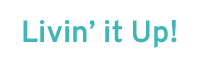
<style>
.page{position:relative;width:200px;height:60px;background:#ffffff}
.page>*{position:absolute;margin:0}
.t1{font:30.5px "Overpass-Bold";color:#40b6b8}
</style>
<div class="page">
<p class="t1" style="left:23px;top:19px;width:154px;height:29px">Livin’ it Up!</p>
</div>
